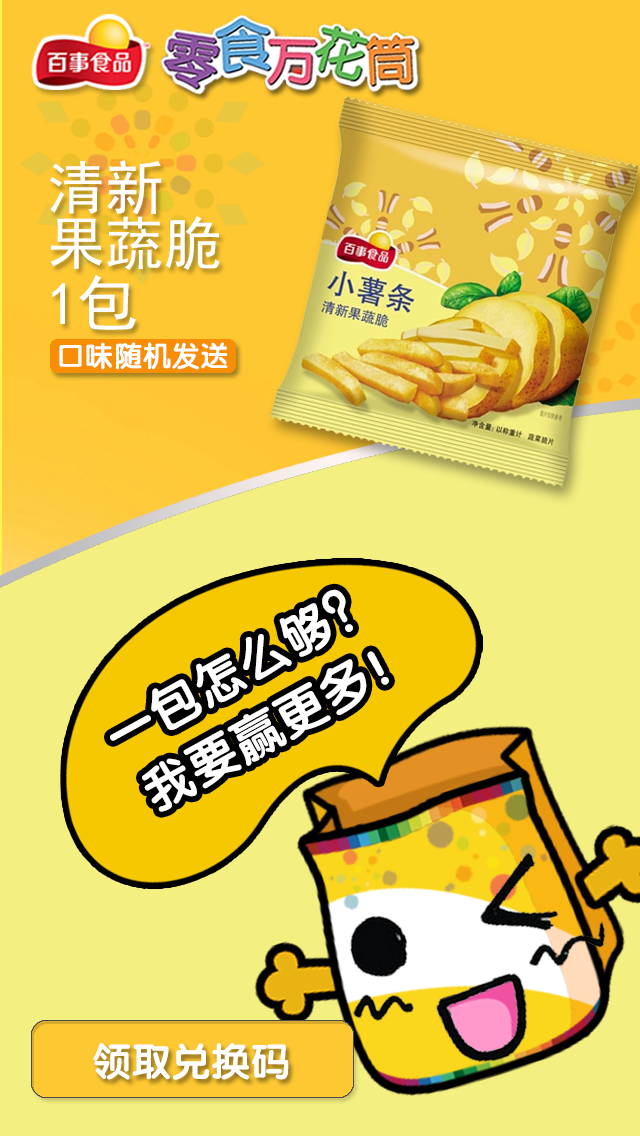
<style>
.page{position:relative;width:640px;height:1136px;background:#f4ef81}
.page>*{position:absolute;margin:0}
.t1{font:58.1px/56px "SimHei";color:#ffffff}
.t2{font:61px "SimHei";color:#ffffff}
.t3{font:28.5px "FZY4JW--GB1-0";color:#ffffff}
.t4{font:50.3px/67px "FZY4JW--GB1-0";color:#ffffff}
.t5{font:39.1px "FZY4JW--GB1-0";color:#ffffff}
</style>
<div class="page">
<p class="t1" style="left:50px;top:160px;width:170px;height:110px">清新<br>果蔬脆</p>
<p class="t2" style="left:52px;top:275px;width:84px;height:55px">1包</p>
<p class="t3" style="left:59px;top:342px;width:169px;height:28px">口味随机发送</p>
<p class="t4" style="left:110px;top:589px;width:279px;height:223px;text-align:center;rotate:-29deg">一包怎么够？ <br>我要赢更多！</p>
<p class="t5" style="left:93px;top:1043px;width:196px;height:37px">领取兑换码</p>
</div>
